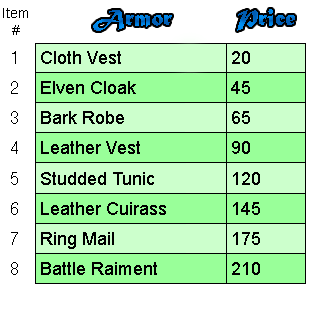
<style>
.page{position:relative;width:311px;height:315px;background:#ffffff}
.page>*{position:absolute;margin:0}
.t1{font:14px "ArialMT";color:#000000}
.t2{font:24px "MaturaMTScriptCapitals"}
.t3{font:18px "Helvetica-Narrow";color:#000000}
.t4{font:18px "ArialMT";color:#000000}
</style>
<div class="page">
<p class="t1" style="left:3px;top:8px;width:25px;height:27px;text-align:center">Item<br>#</p>
<p class="t2" style="left:93px;top:10px;width:79px;height:21px">Armor</p>
<p class="t2" style="left:237px;top:9px;width:58px;height:22px">Price</p>
<p class="t3" style="left:12px;top:51px;width:4px;height:13px">1</p>
<p class="t4" style="left:41px;top:51px;width:80px;height:13px">Cloth Vest</p>
<p class="t4" style="left:232px;top:51px;width:18px;height:13px">20</p>
<p class="t3" style="left:11px;top:81px;width:7px;height:13px">2</p>
<p class="t4" style="left:41px;top:81px;width:95px;height:13px">Elven Cloak</p>
<p class="t4" style="left:231px;top:81px;width:19px;height:13px">45</p>
<p class="t3" style="left:11px;top:111px;width:7px;height:13px">3</p>
<p class="t4" style="left:41px;top:111px;width:83px;height:13px">Bark Robe</p>
<p class="t4" style="left:232px;top:111px;width:18px;height:13px">65</p>
<p class="t3" style="left:11px;top:141px;width:7px;height:13px">4</p>
<p class="t4" style="left:41px;top:141px;width:99px;height:13px">Leather Vest</p>
<p class="t4" style="left:232px;top:141px;width:18px;height:13px">90</p>
<p class="t3" style="left:11px;top:172px;width:7px;height:13px">5</p>
<p class="t4" style="left:41px;top:172px;width:113px;height:13px">Studded Tunic</p>
<p class="t4" style="left:233px;top:172px;width:27px;height:13px">120</p>
<p class="t3" style="left:11px;top:202px;width:7px;height:13px">6</p>
<p class="t4" style="left:41px;top:202px;width:125px;height:13px">Leather Cuirass</p>
<p class="t4" style="left:233px;top:202px;width:27px;height:13px">145</p>
<p class="t3" style="left:11px;top:232px;width:7px;height:13px">7</p>
<p class="t4" style="left:41px;top:232px;width:73px;height:17px">Ring Mail</p>
<p class="t4" style="left:233px;top:232px;width:27px;height:13px">175</p>
<p class="t3" style="left:11px;top:262px;width:7px;height:13px">8</p>
<p class="t4" style="left:41px;top:262px;width:116px;height:13px">Battle Raiment</p>
<p class="t4" style="left:232px;top:262px;width:28px;height:13px">210</p>
</div>
